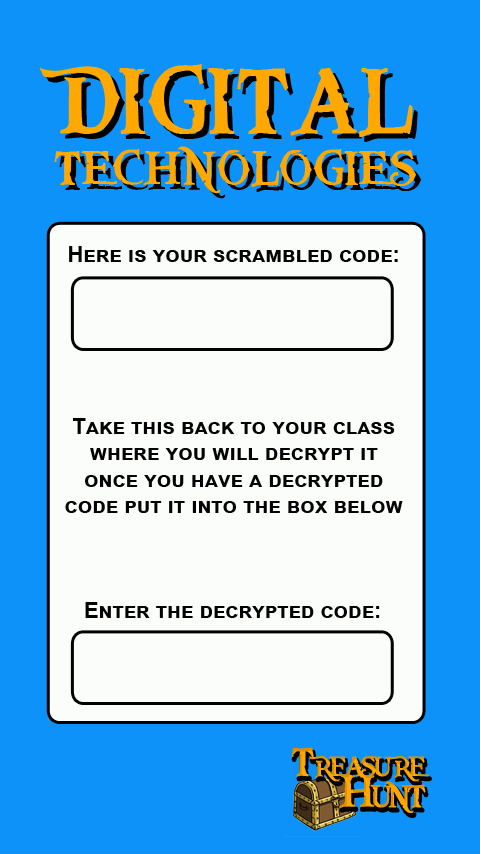
<style>
.page{position:relative;width:480px;height:854px;background:#0c92f9}
.page>*{position:absolute;margin:0}
.t1{font:50.8px/50.1px "PiecesofEight";color:#fea801;font-variant:small-caps}
.t2{font:99px "PiecesofEight";color:#fea801;font-variant:small-caps}
.t3{font:50.8px/50.1px "PiecesofEight";font-variant:small-caps}
.t4{font:99px "PiecesofEight";font-variant:small-caps}
.t5{font:21.9px "Arial-BoldMT";color:#020202;font-variant:small-caps}
.t6{font:42.4px/31.3px "PiecesofEight";letter-spacing:-0.12em;font-variant:small-caps}
.t7{font:48.5px/31.3px "PiecesofEight";letter-spacing:-0.12em;font-variant:small-caps}
</style>
<div class="page">
<p class="t1" style="left:39px;top:64px;width:378px;height:130px;text-align:center"><span class="t2">DIGITAL<br></span>TECHNOLOGIES</p>
<p class="t3" style="left:44px;top:69px;width:378px;height:130px;text-align:center"><span class="t4">DIGITAL<br></span>TECHNOLOGIES</p>
<p class="t5" style="left:69px;top:246px;width:329px;height:16px">Here is your scrambled code:</p>
<p class="t5" style="left:65px;top:418px;width:338px;height:95px;text-align:center">Take this back to your class<br>where you will decrypt it<br>once you have a decrypted<br>code put it into the box below</p>
<p class="t5" style="left:85px;top:602px;width:295px;height:16px">Enter the decrypted code:</p>
<p class="t6" style="left:291px;top:747px;width:138px;height:66px;text-align:right">Treasure<br><span class="t7">Hunt</span></p>
<p class="t6" style="left:293px;top:751px;width:138px;height:66px;text-align:right">Treasure<br><span class="t7">Hunt</span></p>
</div>
